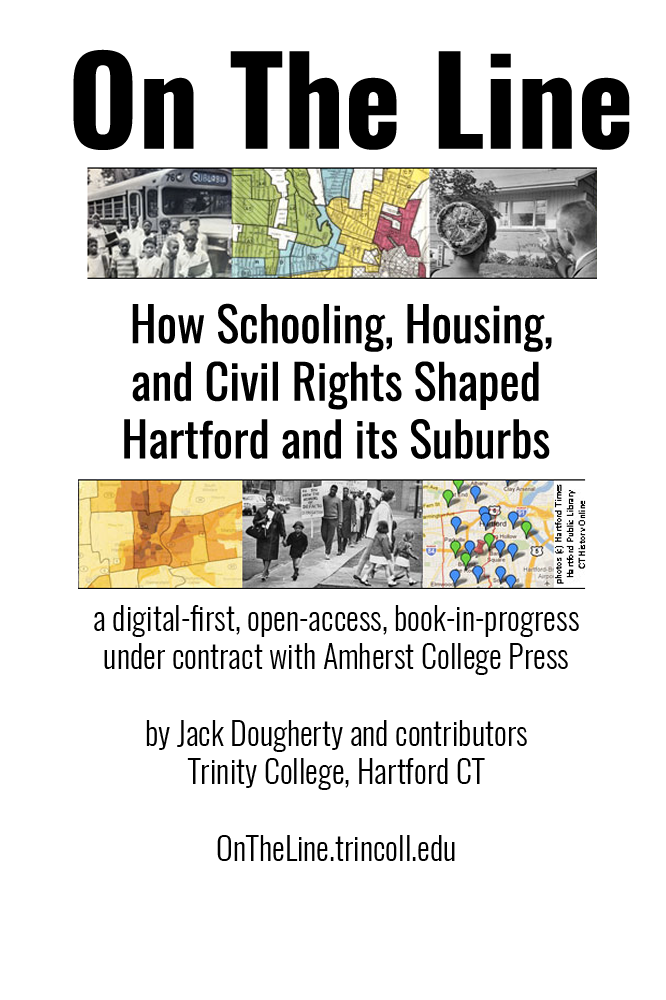
<style>
.page{position:relative;width:666px;height:1000px;background:#ffffff}
.page>*{position:absolute;margin:0}
.t1{font:120px "Oswald-Bold";color:#000000}
.t2{font:48px "Oswald-Regular";color:#000000}
.t3{font:32px "Oswald-Light";color:#000000}
</style>
<div class="page">
<p class="t1" style="left:73px;top:49px;width:557px;height:101px">On The Line</p>
<p class="t2" style="left:124px;top:303px;width:428px;height:156px;text-align:center">How Schooling, Housing,<br>and Civil Rights Shaped <br>Hartford and its Suburbs</p>
<p class="t3" style="left:94px;top:605px;width:485px;height:256px;text-align:center">a digital-first, open-access, book-in-progress<br>under contract with Amherst College Press<br><br>by Jack Dougherty and contributors<br>Trinity College, Hartford CT<br><br>OnTheLine.trincoll.edu</p>
</div>
